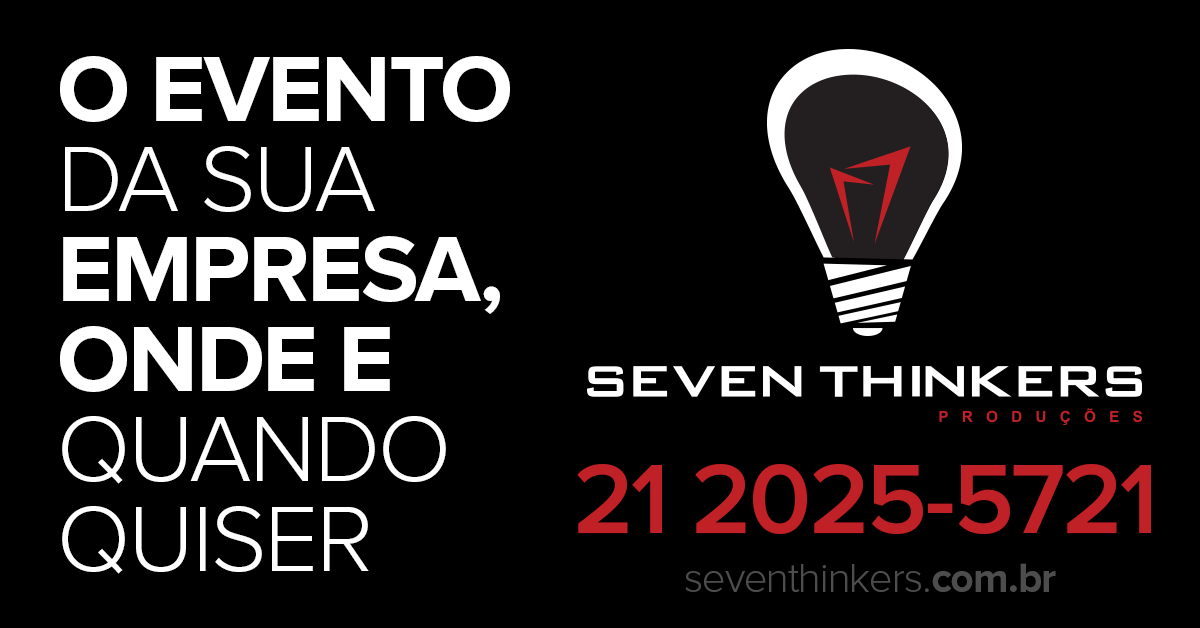
<style>
.page{position:relative;width:1200px;height:628px;background:#000000}
.page>*{position:absolute;margin:0}
.t1{font:96.1px/90px "ProximaNova-Bold";letter-spacing:-0.025em;color:#ffffff}
.t2{font:96.1px/90px "ProximaNova-Light";letter-spacing:-0.025em;color:#ffffff}
.t3{font:101.4px "ProximaNova-Semibold";letter-spacing:-0.025em;color:#bf2126}
.t4{font:41.9px "ProximaNova-Light";letter-spacing:-0.025em;color:#4d4d4d}
.t5{font:41.9px "ProximaNova-Bold";letter-spacing:-0.025em;color:#4d4d4d}
</style>
<div class="page">
<p class="t1" style="left:60px;top:56px;width:450px;height:518px">O EVENTO<br><span class="t2">DA SUA<br></span>EMPRESA,<br>ONDE E<br><span class="t2">QUANDO<br>QUISER</span></p>
<p class="t3" style="left:577px;top:464px;width:574px;height:70px">21 2025-5721</p>
<p class="t4" style="left:685px;top:563px;width:371px;height:29px">seventhinkers.<span class="t5">com.br</span></p>
</div>
